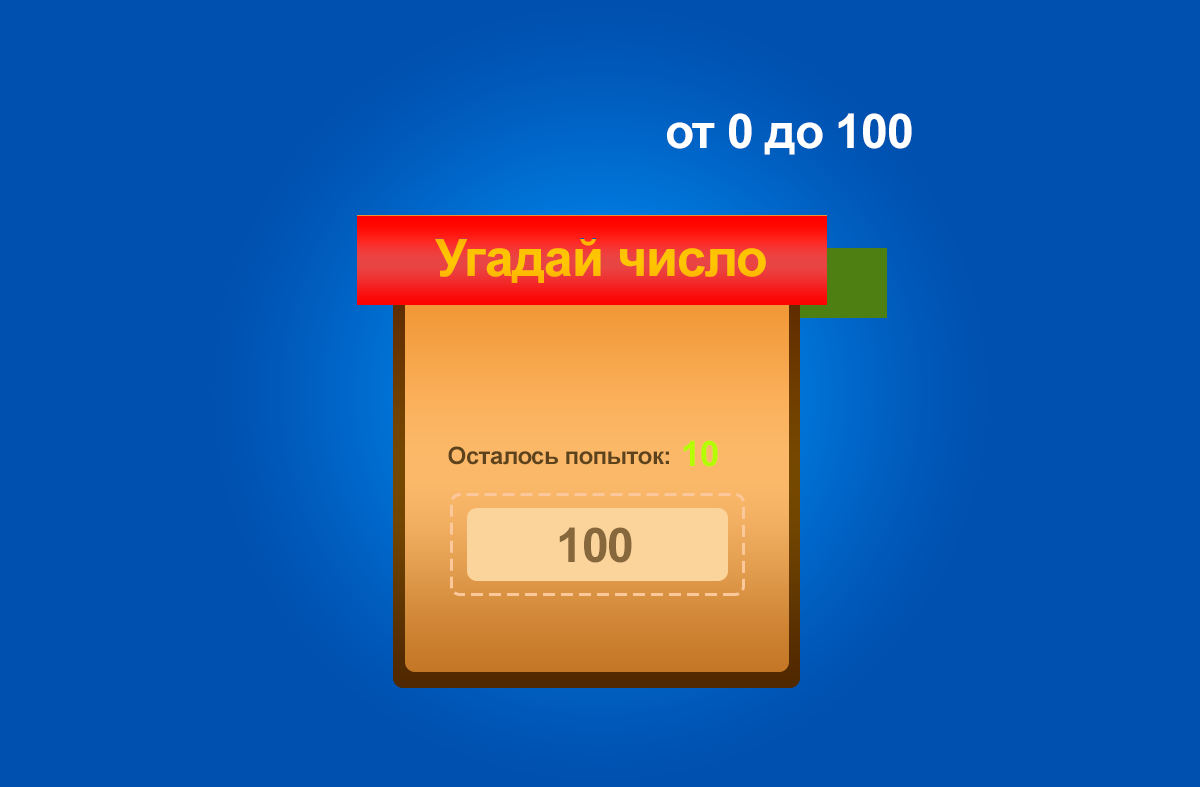
<style>
.page{position:relative;width:1200px;height:787px;background:#0050af}
.page>*{position:absolute;margin:0}
.t1{font:48px "Arial-BoldMT";letter-spacing:-0.02em;color:#ffffff}
.t2{font:52px "Arial-BoldMT";letter-spacing:-0.02em;color:#ffc300}
.t3{font:24px "Arial-BoldMT";letter-spacing:-0.02em;color:#5c421d}
.t4{font:35px "Arial-BoldMT";letter-spacing:-0.02em;color:#b4ff00}
.t5{font:48px "Arial-BoldMT";letter-spacing:-0.02em;color:#86683c}
</style>
<div class="page">
<p class="t1" style="left:667px;top:113px;width:245px;height:42px">от 0 до 100</p>
<p class="t2" style="left:435px;top:238px;width:331px;height:45px">Угадай число</p>
<p class="t3" style="left:448px;top:446px;width:221px;height:19px">Осталось попыток:</p>
<p class="t4" style="left:683px;top:440px;width:35px;height:27px">10</p>
<p class="t5" style="left:559px;top:527px;width:73px;height:36px">100</p>
</div>
